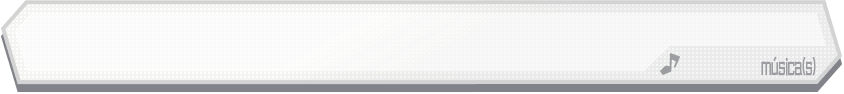
<style>
.page{position:relative;width:844px;height:94px;background:#fbfafb}
.page>*{position:absolute;margin:0}
.t1{font:20px "KafuTechnoStd-E";color:#9b9da0;scale:0.5 1}
</style>
<div class="page">
<p class="t1" style="left:761px;top:56px;width:55px;height:20px">música(s)</p>
</div>
